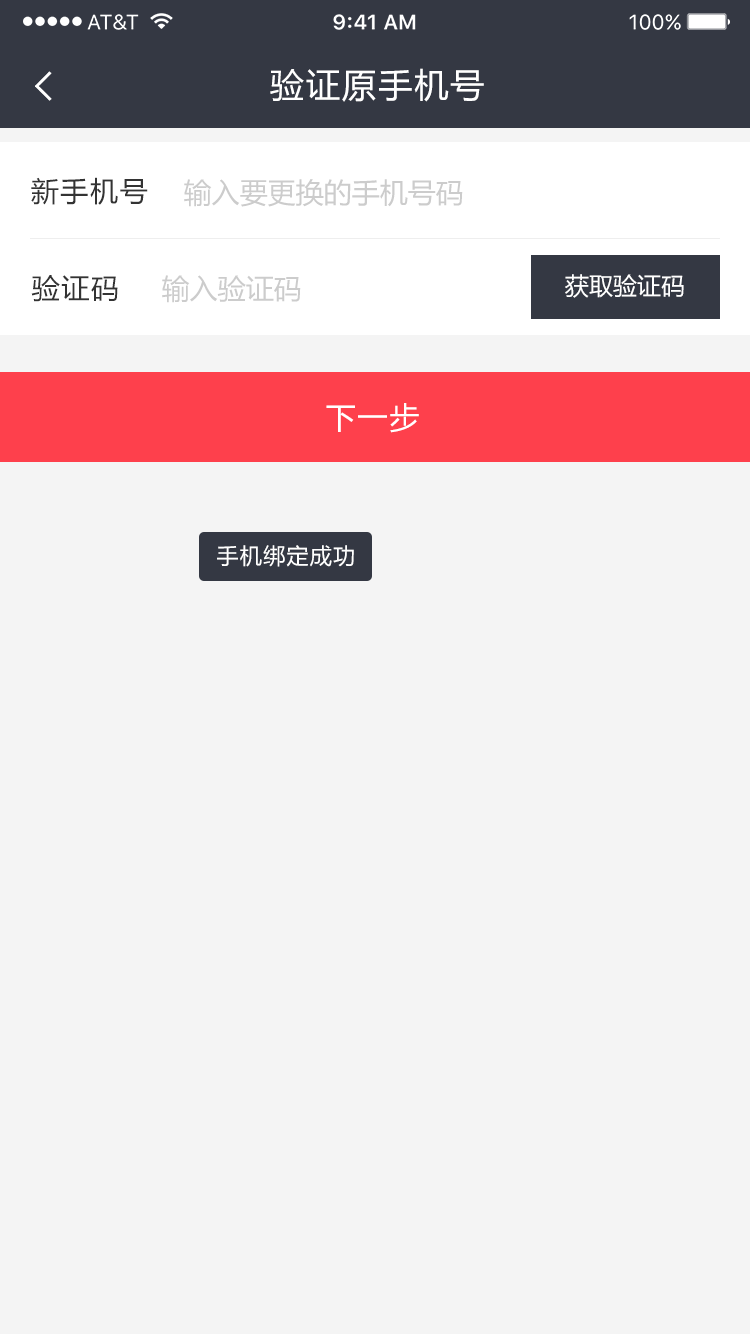
<style>
.page{position:relative;width:750px;height:1334px;background:#f4f4f4}
.page>*{position:absolute;margin:0}
.t1{font:34px "MicrosoftYaHei";letter-spacing:0.06em;color:#ffffff}
.t2{font:28px "MicrosoftYaHei";letter-spacing:0.06em;color:#333333}
.t3{font:28px "MicrosoftYaHei";color:#cccccc}
.t4{font:24px "MicrosoftYaHei";color:#ffffff}
.t5{font:30px "MicrosoftYaHei";letter-spacing:0.06em;color:#ffffff}
.t6{font:22px "MicrosoftYaHei";letter-spacing:0.06em;color:#ffffff}
</style>
<div class="page">
<p class="t1" style="left:270px;top:68px;width:214px;height:34px">验证原手机号</p>
<p class="t2" style="left:31px;top:177px;width:117px;height:28px">新手机号</p>
<p class="t3" style="left:184px;top:179px;width:279px;height:28px">输入要更换的手机号码</p>
<p class="t2" style="left:31px;top:275px;width:87px;height:27px">验证码</p>
<p class="t3" style="left:162px;top:275px;width:139px;height:28px">输入验证码</p>
<p class="t4" style="left:565px;top:274px;width:119px;height:24px">获取验证码</p>
<p class="t5" style="left:326px;top:403px;width:93px;height:30px">下一步</p>
<p class="t6" style="left:217px;top:545px;width:137px;height:22px">手机绑定成功</p>
</div>
